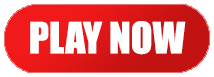
<style>
.page{position:relative;width:214px;height:77px;background:#ffffff}
.page>*{position:absolute;margin:0}
.t1{font:40px "Impact";color:#ffffff}
</style>
<div class="page">
<p class="t1" style="left:30px;top:21px;width:156px;height:34px">PLAY NOW</p>
</div>
